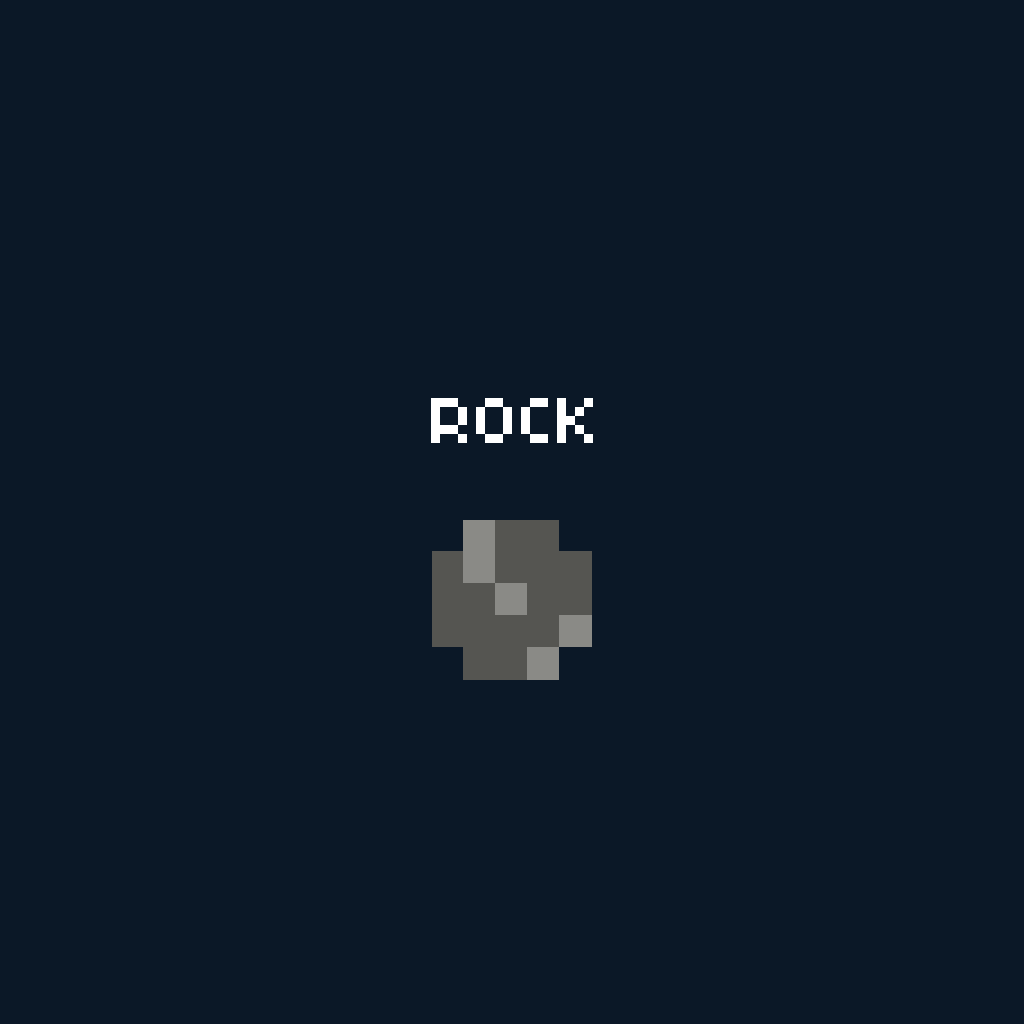
<style>
.page{position:relative;width:1024px;height:1024px;background:#0b1827}
.page>*{position:absolute;margin:0}
.t1{font:72px "04b03";color:#ffffff}
</style>
<div class="page">
<p class="t1" style="left:431px;top:398px;width:162px;height:45px">ROCK</p>
</div>
